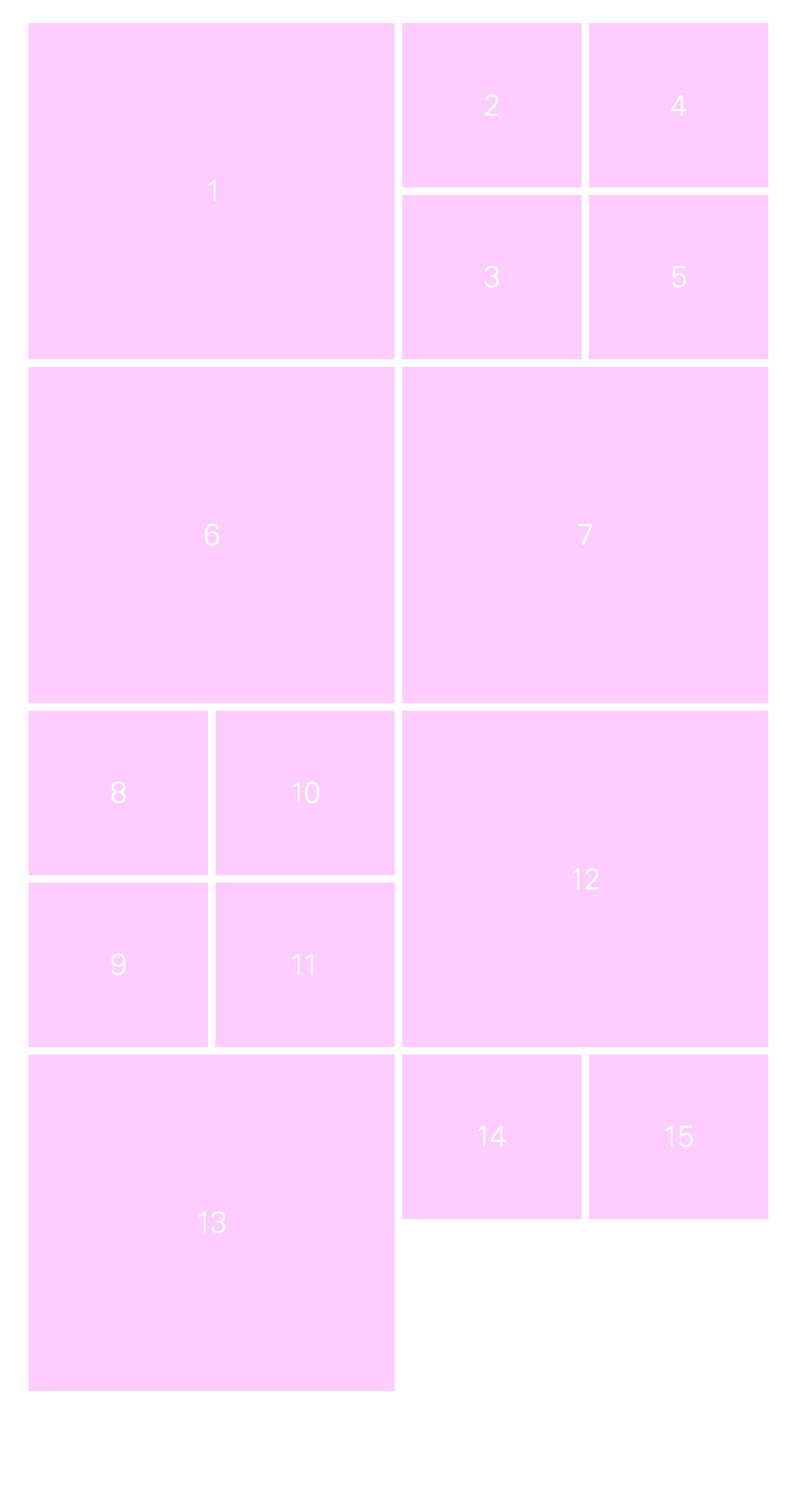
<style>
.page{position:relative;width:797px;height:1495px;background:#ffccff}
.page>*{position:absolute;margin:0}
.t1{font:29.9px "UniversLTStd-Light";color:#ffffff}
</style>
<div class="page">
<p class="t1" style="left:485px;top:94px;width:14px;height:22px">2</p>
<p class="t1" style="left:671px;top:95px;width:16px;height:21px">4</p>
<p class="t1" style="left:209px;top:180px;width:7px;height:21px">1</p>
<p class="t1" style="left:485px;top:265px;width:15px;height:23px">3</p>
<p class="t1" style="left:672px;top:266px;width:15px;height:22px">5</p>
<p class="t1" style="left:204px;top:523px;width:15px;height:23px">6</p>
<p class="t1" style="left:579px;top:524px;width:13px;height:21px">7</p>
<p class="t1" style="left:111px;top:781px;width:15px;height:23px">8</p>
<p class="t1" style="left:293px;top:781px;width:27px;height:23px">10</p>
<p class="t1" style="left:573px;top:868px;width:26px;height:22px">12</p>
<p class="t1" style="left:111px;top:953px;width:15px;height:23px">9</p>
<p class="t1" style="left:293px;top:954px;width:20px;height:21px">11</p>
<p class="t1" style="left:478px;top:1126px;width:29px;height:21px">14</p>
<p class="t1" style="left:666px;top:1126px;width:27px;height:22px">15</p>
<p class="t1" style="left:199px;top:1211px;width:27px;height:23px">13</p>
</div>
